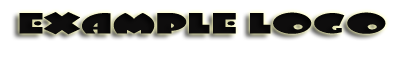
<style>
.page{position:relative;width:396px;height:63px;background:#ffffff}
.page>*{position:absolute;margin:0}
.t1{font:31.1px "ArbuckleRemixNF";letter-spacing:0.01em;color:#0e0d0d;scale:1.8 1}
</style>
<div class="page">
<p class="t1" style="left:19px;top:12px;width:367px;height:23px">EXAMPLE LOGO</p>
</div>
